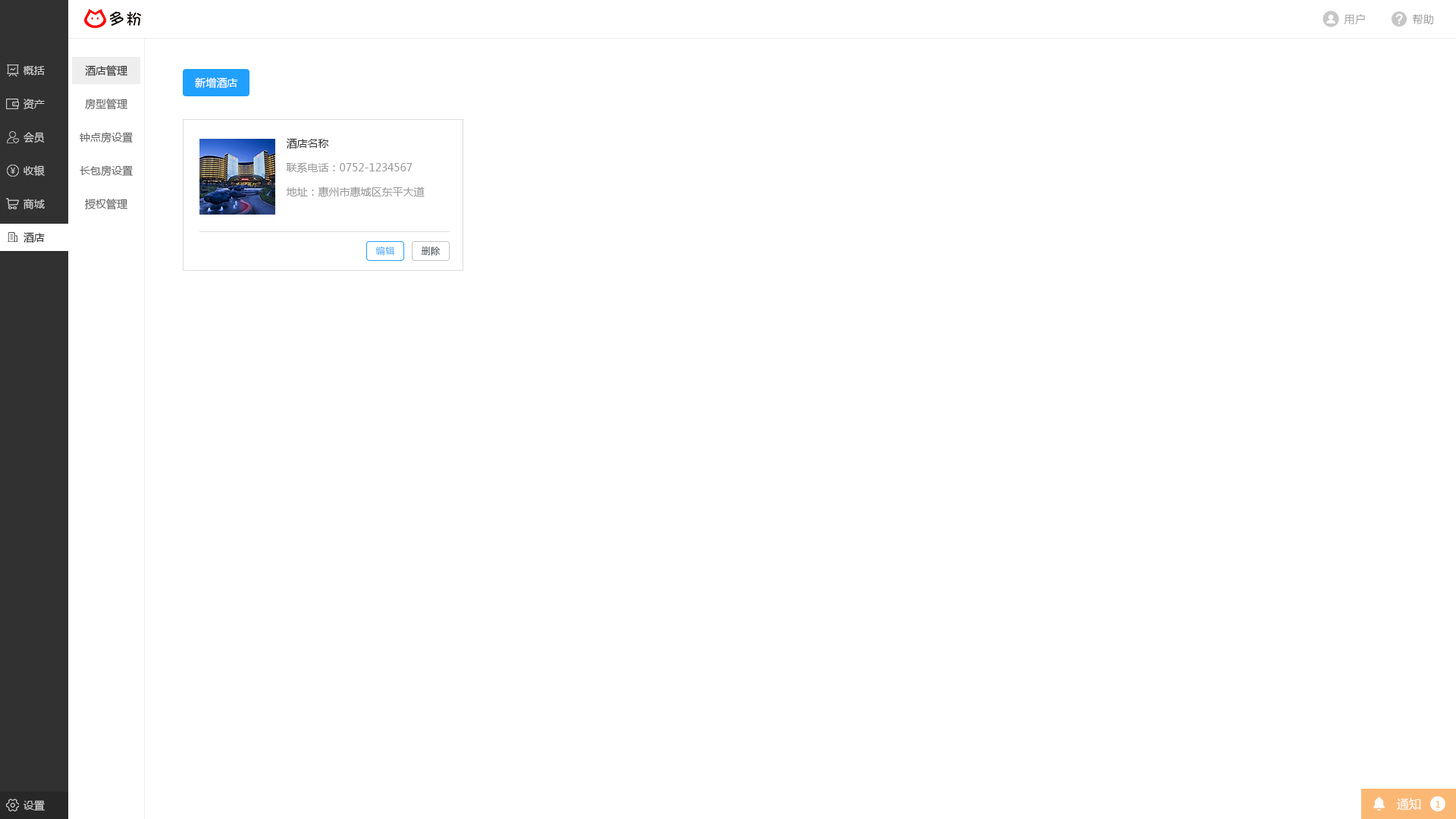
<style>
.page{position:relative;width:1456px;height:819px;background:#ffffff}
.page>*{position:absolute;margin:0}
.t1{font:10.6px "MicrosoftYaHei";letter-spacing:0.025em;color:#999999}
.t2{font:10.6px "MicrosoftYaHei";color:#cccccc}
.t3{font:10.6px "MicrosoftYaHei";color:#333333}
.t4{font:10.6px "MicrosoftYaHei";color:#ffffff}
.t5{font:10.6px "MicrosoftYaHei";color:#666666}
.t6{font:10.6px "MicrosoftYaHei";color:#999999}
.t7{font:10.6px "MicrosoftYaHei";color:#313131}
.t8{font:9.1px "MicrosoftYaHei";letter-spacing:0.025em}
.t9{font:9.1px "MicrosoftYaHei";letter-spacing:0.025em;color:#1f2d3d}
.t10{font:12.1px "MicrosoftYaHei";color:#ffffff}
.t11{font:9.1px "MicrosoftYaHei";color:#fbb875}
</style>
<div class="page">
<p class="t1" style="left:1344px;top:14px;width:21px;height:11px">用户</p>
<p class="t1" style="left:1413px;top:14px;width:20px;height:11px">帮助</p>
<p class="t2" style="left:23px;top:66px;width:22px;height:9px">概括</p>
<p class="t3" style="left:85px;top:65px;width:42px;height:12px">酒店管理</p>
<p class="t4" style="left:195px;top:77px;width:43px;height:12px">新增酒店</p>
<p class="t2" style="left:24px;top:99px;width:21px;height:10px">资产</p>
<p class="t5" style="left:85px;top:99px;width:42px;height:11px">房型管理</p>
<p class="t2" style="left:24px;top:132px;width:21px;height:11px">会员</p>
<p class="t5" style="left:80px;top:132px;width:53px;height:11px">钟点房设置</p>
<p class="t3" style="left:286px;top:138px;width:43px;height:11px">酒店名称</p>
<p class="t2" style="left:24px;top:165px;width:21px;height:11px">收银</p>
<p class="t5" style="left:80px;top:165px;width:53px;height:12px">长包房设置</p>
<p class="t6" style="left:286px;top:162px;width:127px;height:11px">联系电话：0752-1234567</p>
<p class="t6" style="left:286px;top:187px;width:139px;height:10px">地址：惠州市惠城区东平大道</p>
<p class="t2" style="left:23px;top:199px;width:22px;height:10px">商城</p>
<p class="t5" style="left:85px;top:199px;width:42px;height:11px">授权管理</p>
<p class="t7" style="left:24px;top:232px;width:21px;height:11px">酒店</p>
<p class="t8" style="left:375px;top:246px;width:19px;height:10px">编辑</p>
<p class="t9" style="left:421px;top:246px;width:20px;height:10px">删除</p>
<p class="t10" style="left:1397px;top:798px;width:24px;height:12px">通知</p>
<p class="t2" style="left:23px;top:800px;width:22px;height:11px">设置</p>
<p class="t11" style="left:1436px;top:801px;width:5px;height:7px">1</p>
</div>
